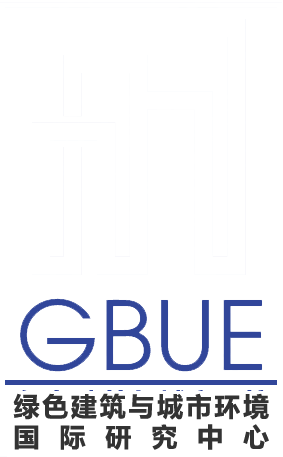
<style>
.page{position:relative;width:283px;height:457px;background:#ffffff}
.page>*{position:absolute;margin:0}
.t1{font:26px "MicrosoftYaHei-Bold";color:#333333}
</style>
<div class="page">
<p class="t1" style="left:13px;top:393px;width:256px;height:57px;text-align:justify">绿色建筑与城市环境<br>国际研究中心</p>
</div>
